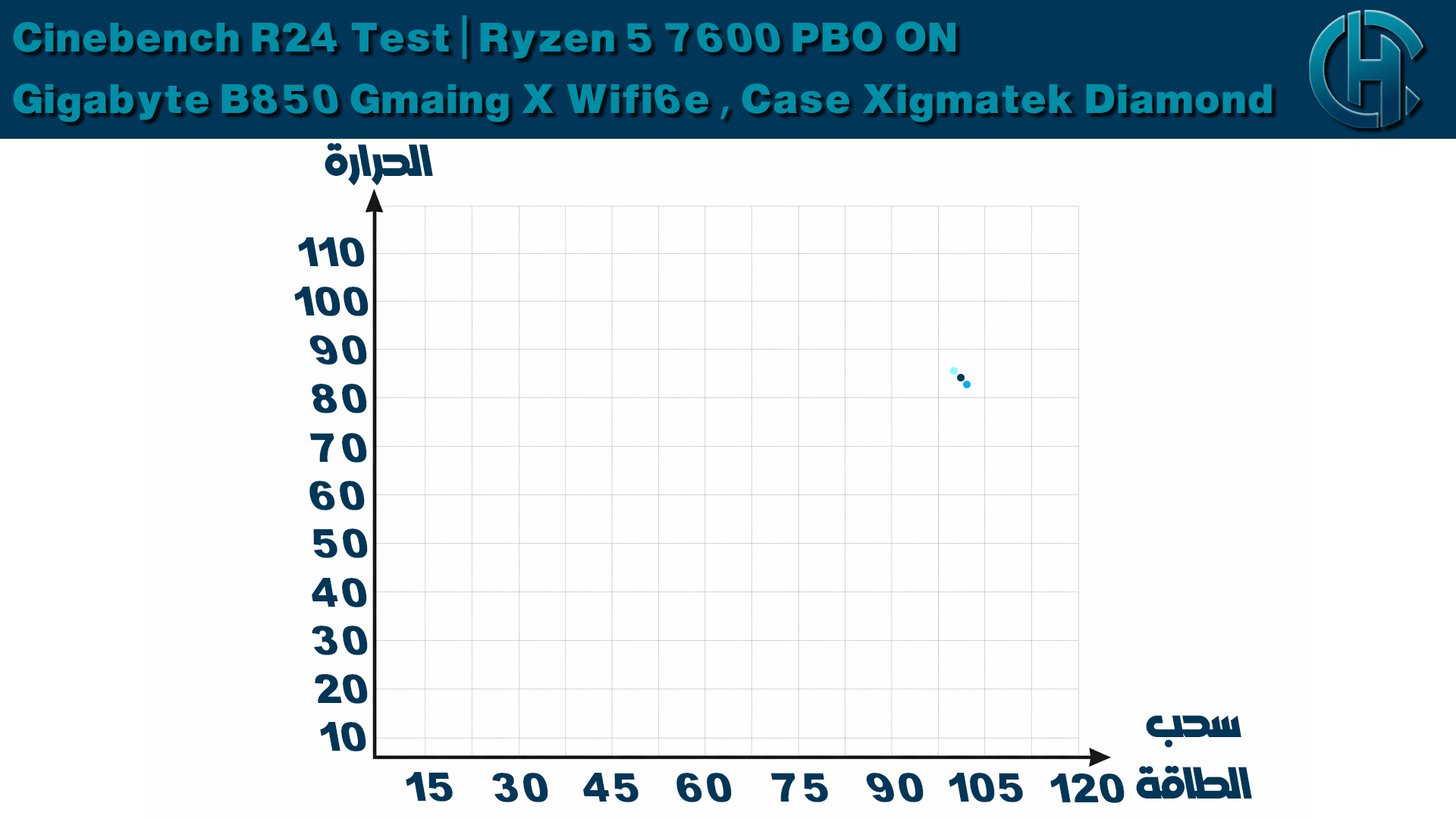
<style>
.page{position:relative;width:1456px;height:819px;background:#fefefe}
.page>*{position:absolute;margin:0}
.t1{font:51.6px "Jenine-Bold";color:#008ea6}
.t2{font:51.6px "MyriadPro-Regular";color:#008ea6}
.t3{font:51.6px "Jenine-Bold";color:#003657}
</style>
<div class="page">
<p class="t1" style="left:13px;top:15px;width:1259px;height:107px">Cinebench R24 Test | Ryzen 5 7600 PBO ON<br>Gigabyte B850 Gmaing X Wifi6e <span class="t2">,</span> Case Xigmatek Diamond</p>
<p class="t3" style="left:325px;top:143px;width:108px;height:43px">الحرارة</p>
<p class="t3" style="left:298px;top:237px;width:67px;height:30px">110</p>
<p class="t3" style="left:294px;top:287px;width:75px;height:29px">100</p>
<p class="t3" style="left:309px;top:335px;width:58px;height:30px">90</p>
<p class="t3" style="left:312px;top:384px;width:55px;height:29px">80</p>
<p class="t3" style="left:309px;top:433px;width:58px;height:30px">70</p>
<p class="t3" style="left:309px;top:481px;width:56px;height:29px">60</p>
<p class="t3" style="left:313px;top:529px;width:55px;height:29px">50</p>
<p class="t3" style="left:312px;top:578px;width:55px;height:29px">40</p>
<p class="t3" style="left:312px;top:626px;width:56px;height:29px">30</p>
<p class="t3" style="left:315px;top:674px;width:53px;height:30px">20</p>
<p class="t3" style="left:320px;top:722px;width:46px;height:29px">10</p>
<p class="t3" style="left:1136px;top:715px;width:116px;height:84px;text-align:center">سحب<br>الطاقة</p>
<p class="t3" style="left:406px;top:772px;width:47px;height:30px">15</p>
<p class="t3" style="left:492px;top:773px;width:56px;height:29px">30</p>
<p class="t3" style="left:583px;top:773px;width:56px;height:29px">45</p>
<p class="t3" style="left:676px;top:773px;width:56px;height:29px">60</p>
<p class="t3" style="left:770px;top:773px;width:58px;height:29px">75</p>
<p class="t3" style="left:866px;top:773px;width:58px;height:29px">90</p>
<p class="t3" style="left:949px;top:773px;width:74px;height:29px">105</p>
<p class="t3" style="left:1050px;top:773px;width:75px;height:30px">120</p>
</div>
